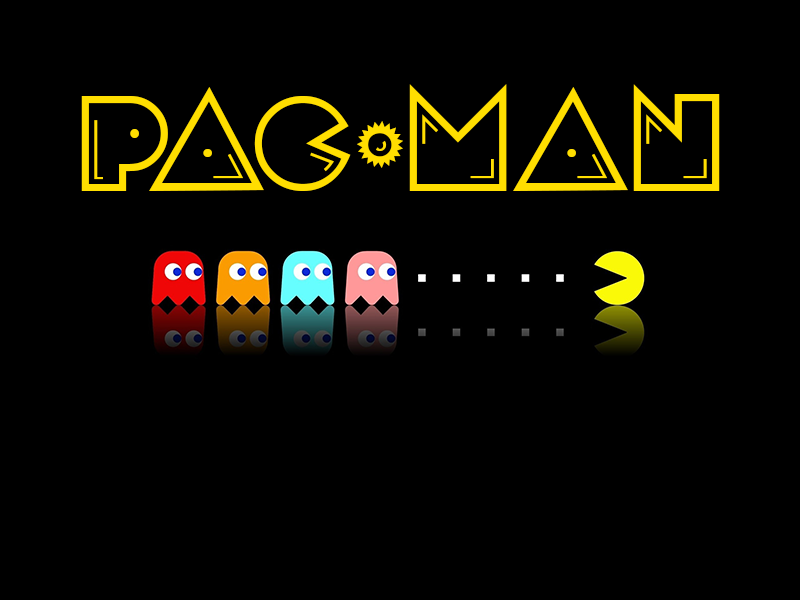
<style>
.page{position:relative;width:800px;height:600px;background:#000000}
.page>*{position:absolute;margin:0}
.t1{font:115.4px "PacFontGood";color:#ffde00}
</style>
<div class="page">
<p class="t1" style="left:81px;top:84px;width:639px;height:107px">PAC-MAN</p>
</div>
